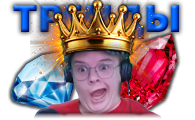
<style>
.page{position:relative;width:195px;height:120px}
.page>*{position:absolute;margin:0}
.t1{font:37.8px "SegoeUIBlack"}
</style>
<div class="page">
<p class="t1" style="left:13px;top:5px;width:166px;height:34px">ТРЕНДЫ</p>
</div>
